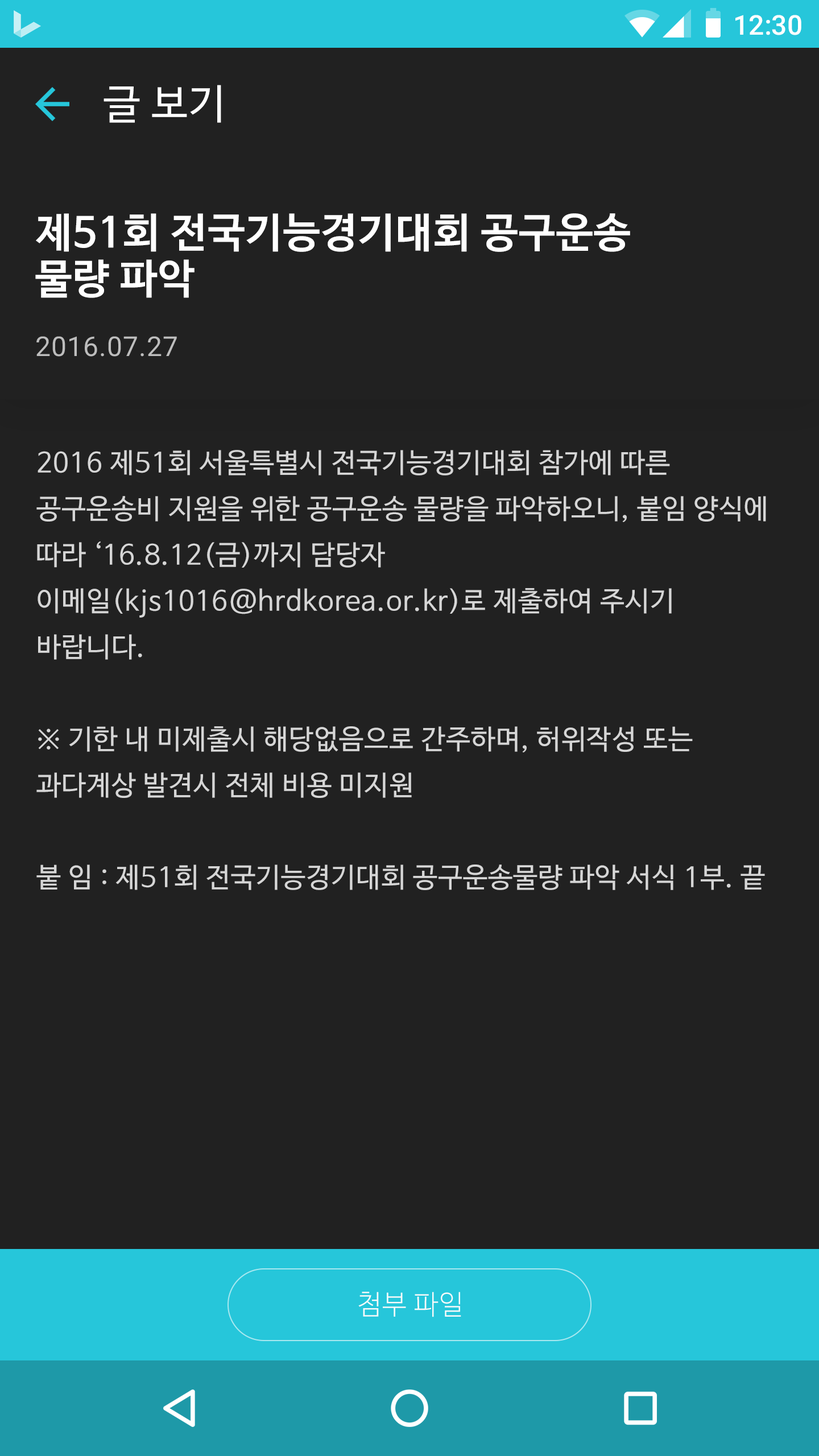
<style>
.page{position:relative;width:819px;height:1456px;background:#212121}
.page>*{position:absolute;margin:0}
.t1{font:27.3px "Roboto-Medium";color:#ffffff}
.t2{font:40.9px "NanumBarunGothic";letter-spacing:0.025em;color:#ffffff}
.t3{font:40.9px/46.1px "NanumBarunGothicBold";letter-spacing:0.025em;color:#ffffff}
.t4{font:27.3px "Roboto-Regular";letter-spacing:0.025em;color:#bdbdbd}
.t5{font:27.3px/46.1px "NanumBarunGothic";letter-spacing:0.025em;color:#d6d6d6}
.t6{font:27.3px "NanumBarunGothicLight";letter-spacing:0.025em;color:#fafafa}
</style>
<div class="page">
<p class="t1" style="left:735px;top:15px;width:66px;height:20px">12:30</p>
<p class="t2" style="left:104px;top:85px;width:117px;height:38px">글 보기</p>
<p class="t3" style="left:35px;top:213px;width:595px;height:85px">제51회 전국기능경기대회 공구운송 <br>물량 파악</p>
<p class="t4" style="left:36px;top:336px;width:141px;height:21px">2016.07.27</p>
<p class="t5" style="left:36px;top:450px;width:730px;height:440px">2016 제51회 서울특별시 전국기능경기대회 참가에 따른 공구운송비 지원을 위한 공구운송 물량을 파악하오니, 붙임 양식에 따라 ‘16.8.12(금)까지 담당자 <br>이메일(kjs1016@hrdkorea.or.kr)로 제출하여 주시기 바랍니다. <br><br>※ 기한 내 미제출시 해당없음으로 간주하며, 허위작성 또는 과다계상 발견시 전체 비용 미지원<br><br>붙 임 : 제51회 전국기능경기대회 공구운송물량 파악 서식 1부. 끝</p>
<p class="t6" style="left:358px;top:1292px;width:103px;height:25px">첨부 파일</p>
</div>
